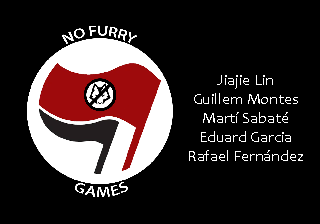
<style>
.page{position:relative;width:320px;height:224px;background:#000000}
.page>*{position:absolute;margin:0}
.t1{font:16px "Candara";color:#ffffff}
</style>
<div class="page">
<p class="t1" style="left:217px;top:75px;width:56px;height:14px">Jiajie Lin</p>
<p class="t1" style="left:194px;top:93px;width:104px;height:11px">Guillem Montes</p>
<p class="t1" style="left:203px;top:112px;width:85px;height:11px">Martí Sabaté</p>
<p class="t1" style="left:201px;top:131px;width:90px;height:11px">Eduard Garcia</p>
<p class="t1" style="left:189px;top:150px;width:114px;height:11px">Rafael Fernández</p>
</div>
